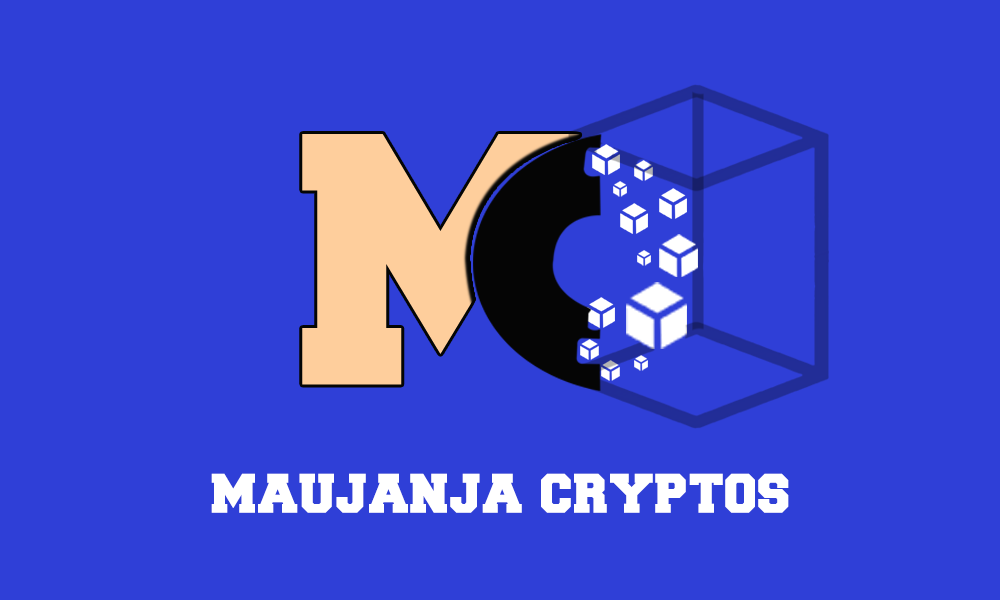
<style>
.page{position:relative;width:1000px;height:600px;background:#2f3fd7}
.page>*{position:absolute;margin:0}
.t1{font:58.3px "CollegiateBlackFLF";color:#ffffff}
</style>
<div class="page">
<p class="t1" style="left:211px;top:473px;width:578px;height:40px">maujanja cryptos</p>
</div>
